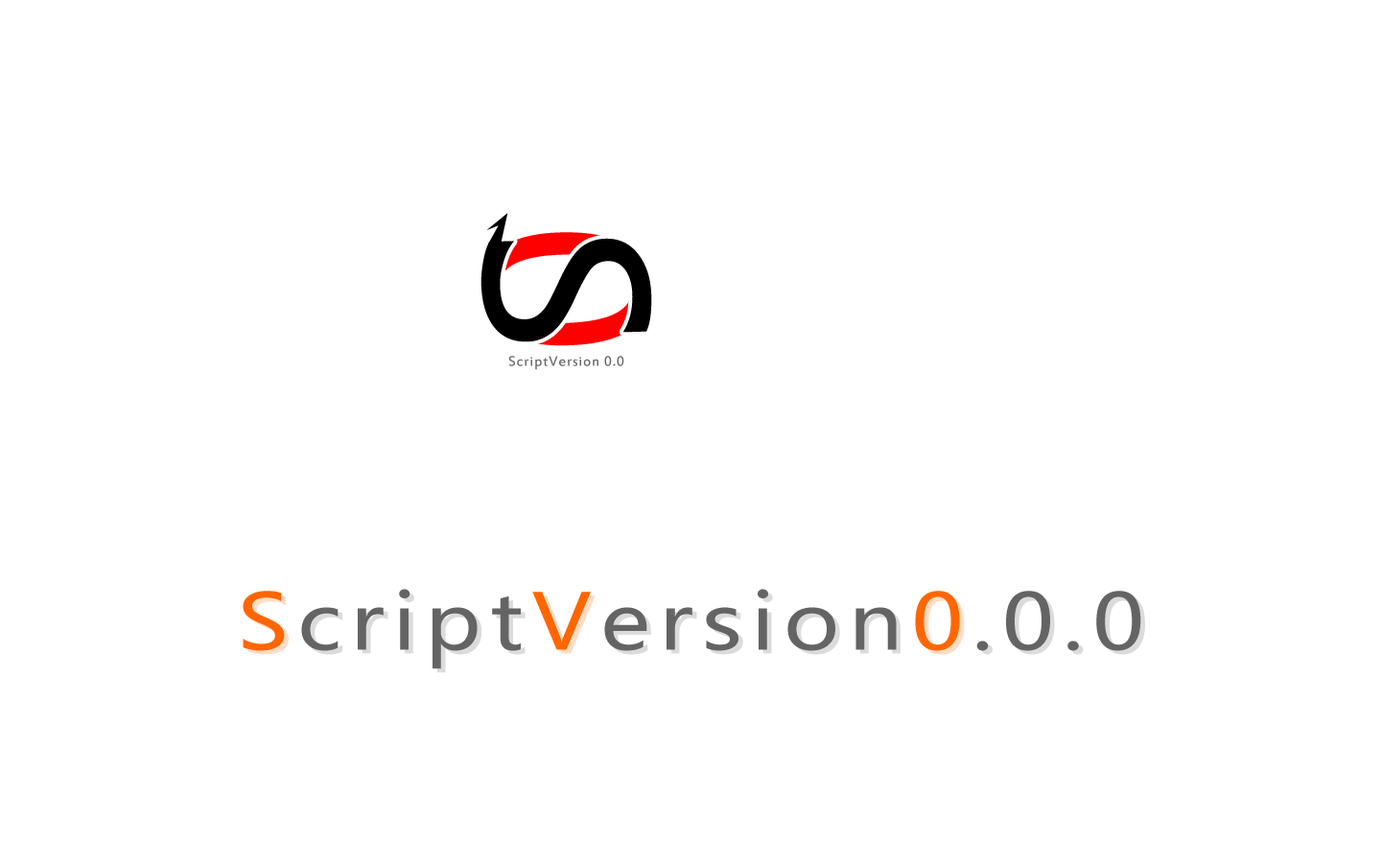
<style>
.page{position:relative;width:1381px;height:863px;background:#ffffff}
.page>*{position:absolute;margin:0}
.t1{font:216.1px "MicrosoftYaHei";letter-spacing:0.1em;scale:1.05 1}
.t2{font:217px "MicrosoftYaHei";letter-spacing:0.1em;color:#000000}
.t3{font:15.3px "EstrangeloEdessa";letter-spacing:0.05em;color:#6a6a6a}
.t4{font:76.5px "MicrosoftYaHei";letter-spacing:0.1em;color:#646464;scale:1.15 1}
.t5{font:76.5px "MicrosoftYaHei";letter-spacing:0.1em;color:#ff6600;scale:1.15 1}
.t6{font:76.5px "MicrosoftYaHei";letter-spacing:0.1em;scale:1.15 1}
</style>
<div class="page">
<p class="t1" style="left:480px;top:232px;width:170px;height:114px;rotate:88deg">0</p>
<p class="t2" style="left:481px;top:238px;width:171px;height:104px;rotate:88deg">S</p>
<p class="t3" style="left:508px;top:356px;width:116px;height:14px">ScriptVersion 0.0</p>
<p class="t4" style="left:243px;top:589px;width:898px;height:81px"><span class="t5">S</span>cript<span class="t5">V</span>ersion<span class="t5">0</span>.0.0</p>
<p class="t6" style="left:247px;top:593px;width:898px;height:80px">ScriptVersion0.0.0</p>
</div>
